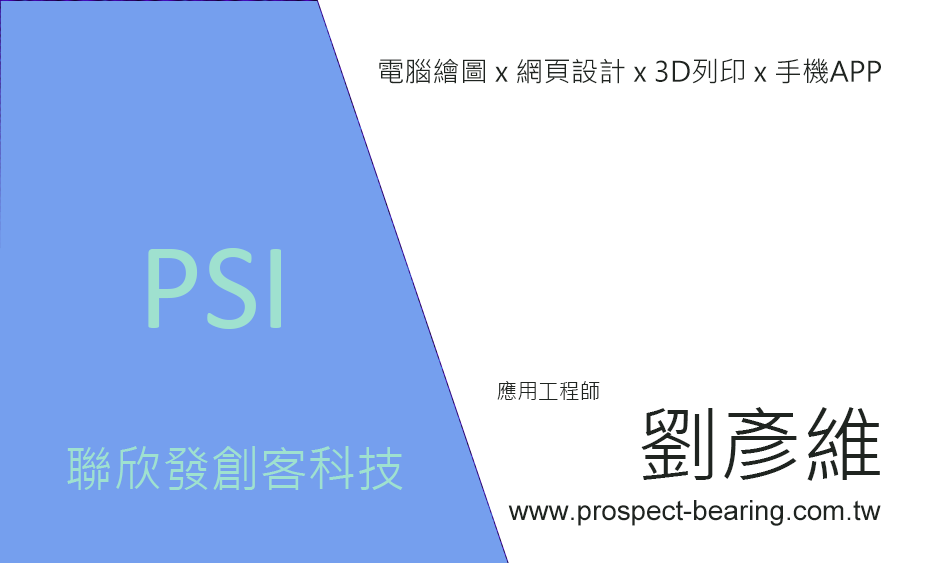
<style>
.page{position:relative;width:938px;height:563px;background:#ffffff}
.page>*{position:absolute;margin:0}
.t1{font:27.8px "MicrosoftJhengHeiRegular";color:#1f2420}
.t2{font:125px "Calibri";color:#9fe1cf}
.t3{font:20.8px "MicrosoftJhengHeiRegular";color:#1f2420}
.t4{font:83.3px "MicrosoftJhengHeiRegular";color:#1f2420}
.t5{font:48.6px "MicrosoftJhengHeiRegular";color:#9fe1cf}
.t6{font:27.8px "ArialMT";color:#1f2420}
</style>
<div class="page">
<p class="t1" style="left:379px;top:58px;width:502px;height:26px">電腦繪圖 x 網頁設計 x 3D列印 x 手機APP</p>
<p class="t2" style="left:148px;top:248px;width:133px;height:81px">PSI</p>
<p class="t3" style="left:497px;top:381px;width:103px;height:19px">應用工程師</p>
<p class="t4" style="left:641px;top:407px;width:239px;height:74px">劉彥維</p>
<p class="t5" style="left:67px;top:446px;width:336px;height:44px">聯欣發創客科技</p>
<p class="t6" style="left:508px;top:500px;width:373px;height:26px">www.prospect-bearing.com.tw</p>
</div>
